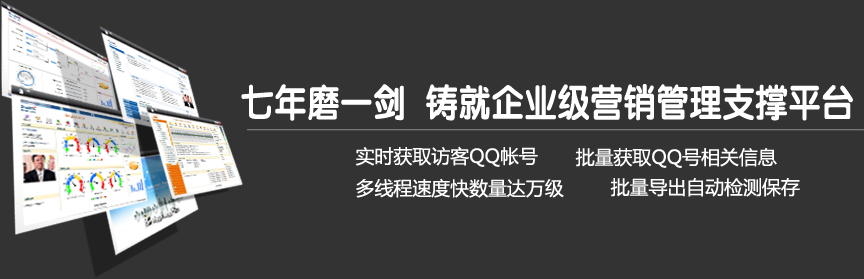
<style>
.page{position:relative;width:864px;height:279px;background:#333333}
.page>*{position:absolute;margin:0}
.t1{font:38.3px "FZY4JW--GB1-0";color:#ffffff;scale:0.86 1}
.t2{font:18.9px "MicrosoftYaHeiUI";color:#ffffff}
</style>
<div class="page">
<p class="t1" style="left:241px;top:84px;width:612px;height:37px">七年磨一剑 铸就企业级营销管理支撑平台</p>
<p class="t2" style="left:355px;top:146px;width:183px;height:21px">实时获取访客QQ帐号</p>
<p class="t2" style="left:575px;top:148px;width:202px;height:20px">批量获取QQ号相关信息</p>
<p class="t2" style="left:356px;top:178px;width:208px;height:20px">多线程速度快数量达万级</p>
<p class="t2" style="left:610px;top:178px;width:190px;height:19px">批量导出自动检测保存</p>
</div>
